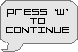
<style>
.page{position:relative;width:78px;height:52px;background:#e5e5e5}
.page>*{position:absolute;margin:0}
.t1{font:11px/9px "LuggageRoundLight";color:#000000;text-transform:uppercase;scale:1.14 1}
</style>
<div class="page">
<p class="t1" style="left:6px;top:9px;width:63px;height:24px;text-align:center">Press ‘W’ to <br>Continue</p>
</div>
